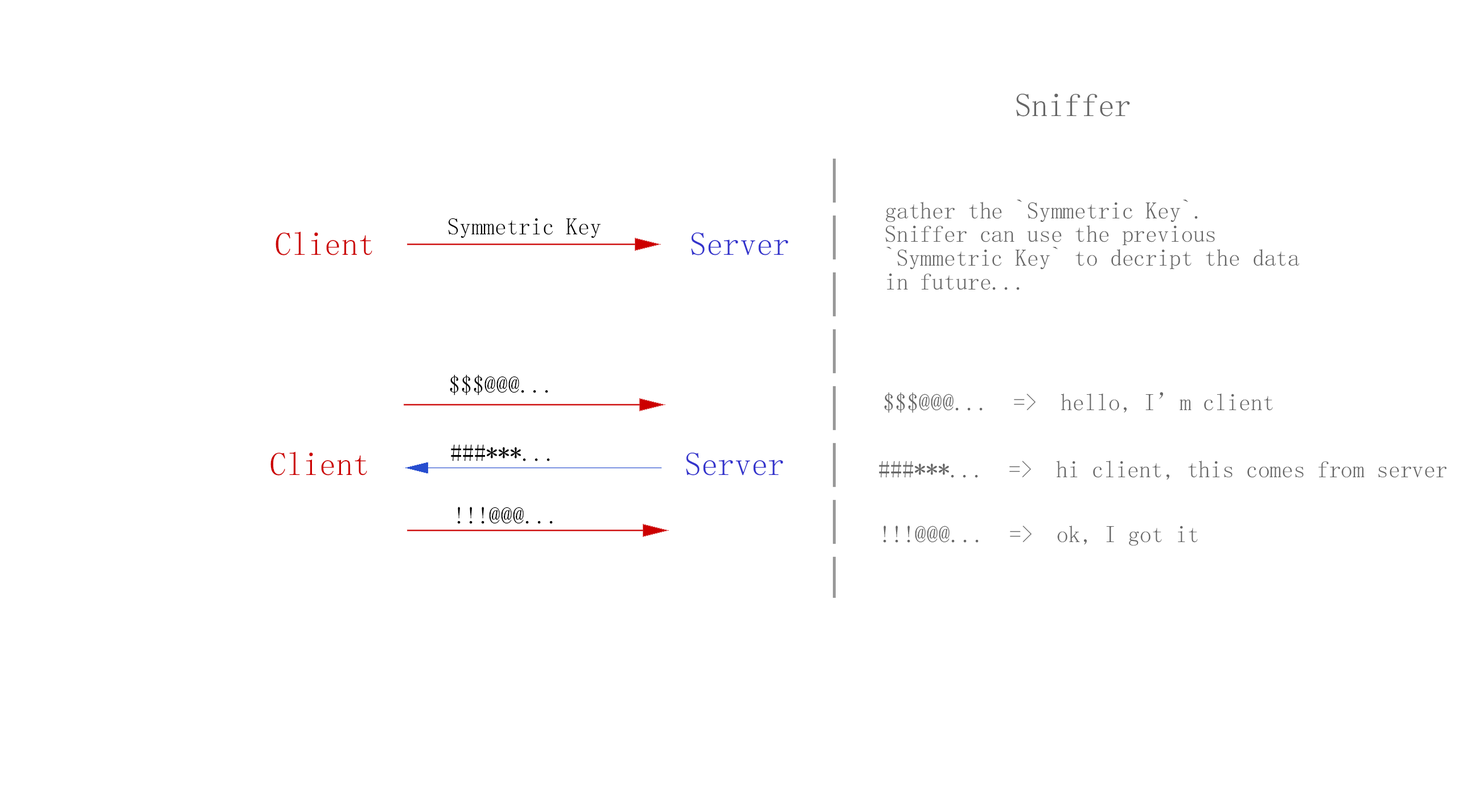
<style>
.page{position:relative;width:1479px;height:806px;background:#ffffff}
.page>*{position:absolute;margin:0}
.t1{font:33.2px "FangSong";color:#666666}
.t2{font:23.7px/23.7px "FangSong";color:#666666}
.t3{font:23.7px "FangSong";color:#000000}
.t4{font:33.2px "FangSong";color:#cc0000}
.t5{font:33.2px "FangSong";color:#3333cc}
.t6{font:23.7px "FangSong";color:#666666}
</style>
<div class="page">
<p class="t1" style="left:1016px;top:93px;width:114px;height:24px">Sniffer</p>
<p class="t2" style="left:885px;top:200px;width:414px;height:90px">gather the `Symmetric Key`.<br>Sniffer can use the previous<br>`Symmetric Key` to decript the data <br>in future...</p>
<p class="t3" style="left:448px;top:218px;width:153px;height:20px">Symmetric Key</p>
<p class="t4" style="left:275px;top:232px;width:513px;height:24px">Client                   <span class="t5">Server</span></p>
<p class="t3" style="left:450px;top:375px;width:98px;height:21px">$$$@@@...</p>
<p class="t6" style="left:884px;top:392px;width:389px;height:21px">$$$@@@...  =&gt;  hello, I’m client</p>
<p class="t3" style="left:451px;top:444px;width:99px;height:18px">###***...</p>
<p class="t4" style="left:270px;top:452px;width:513px;height:24px">Client                   <span class="t5">Server</span></p>
<p class="t6" style="left:879px;top:460px;width:567px;height:20px">###***...  =&gt;  hi client, this comes from server</p>
<p class="t3" style="left:457px;top:507px;width:96px;height:17px">!!!@@@...</p>
<p class="t6" style="left:883px;top:525px;width:314px;height:21px">!!!@@@...  =&gt;  ok, I got it</p>
</div>
